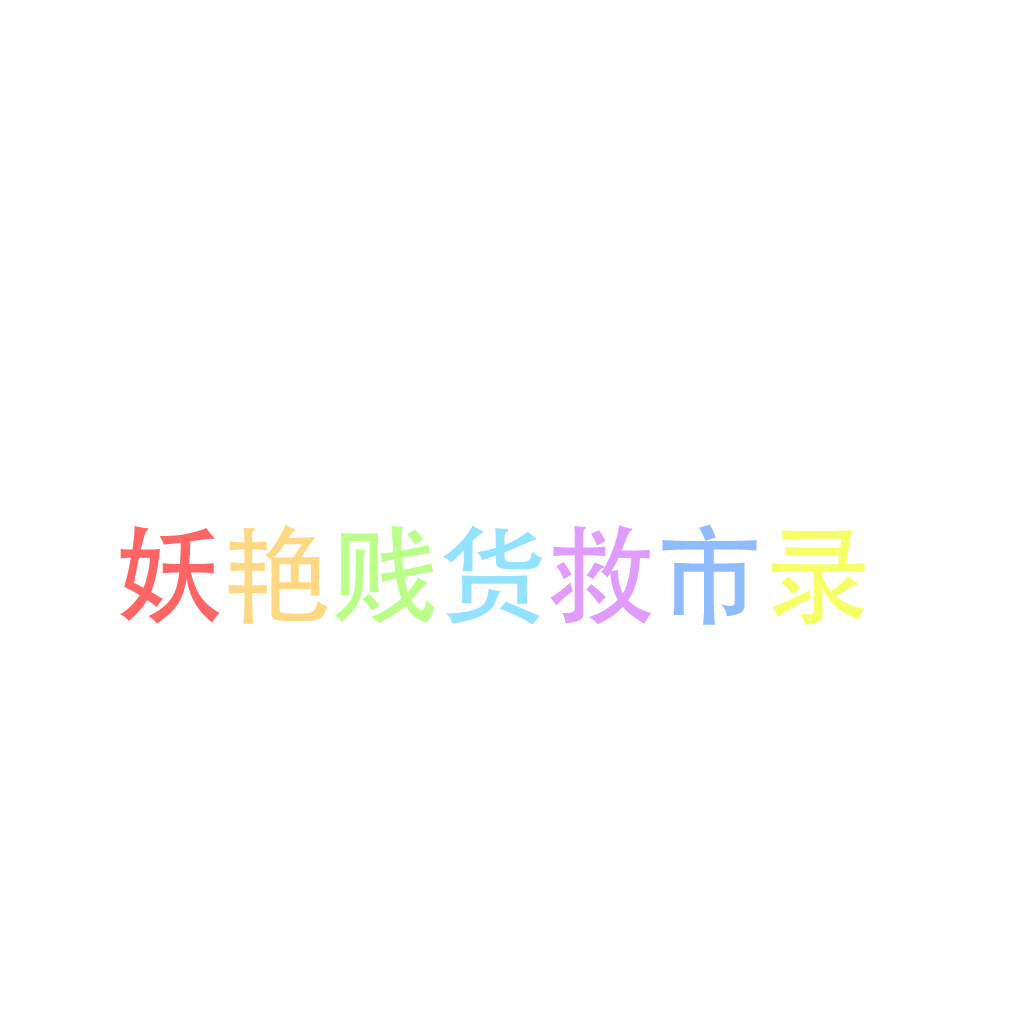
<style>
.page{position:relative;width:1024px;height:1024px;background:#ffffff}
.page>*{position:absolute;margin:0}
.t1{font:108px "AdobeHeitiStd-Regular";color:#ff6565}
.t2{font:108px "AdobeHeitiStd-Regular";color:#ffd883}
.t3{font:108px "AdobeHeitiStd-Regular";color:#bbfe89}
.t4{font:108px "AdobeHeitiStd-Regular";color:#93e2ff}
.t5{font:108px "AdobeHeitiStd-Regular";color:#e09cff}
.t6{font:108px "AdobeHeitiStd-Regular";color:#8fbcff}
.t7{font:108px "AdobeHeitiStd-Regular";color:#f6ff65}
</style>
<div class="page">
<p class="t1" style="left:120px;top:524px;width:745px;height:101px">妖<span class="t2">艳</span><span class="t3">贱</span><span class="t4">货</span><span class="t5">救</span><span class="t6">市</span><span class="t7">录</span></p>
</div>
